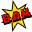
<style>
.page{position:relative;width:32px;height:32px;background:#ffffff}
.page>*{position:absolute;margin:0}
.t1{font:14px "Mario-Kart-DS";letter-spacing:-0.02em;color:#000000;text-decoration:underline}
</style>
<div class="page">
<p class="t1" style="left:1px;top:7px;width:32px;height:19px;rotate:-16deg">BAM</p>
</div>
